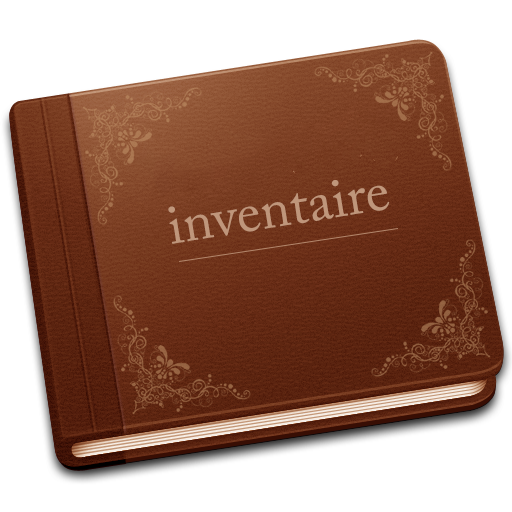
<style>
.page{position:relative;width:512px;height:512px;background:#ffffff}
.page>*{position:absolute;margin:0}
.t1{font:56.5px "ACaslonPro-Regular";color:#bf967b}
</style>
<div class="page">
<p class="t1" style="left:168px;top:180px;width:222px;height:64px;rotate:-9deg">inventaire</p>
</div>
